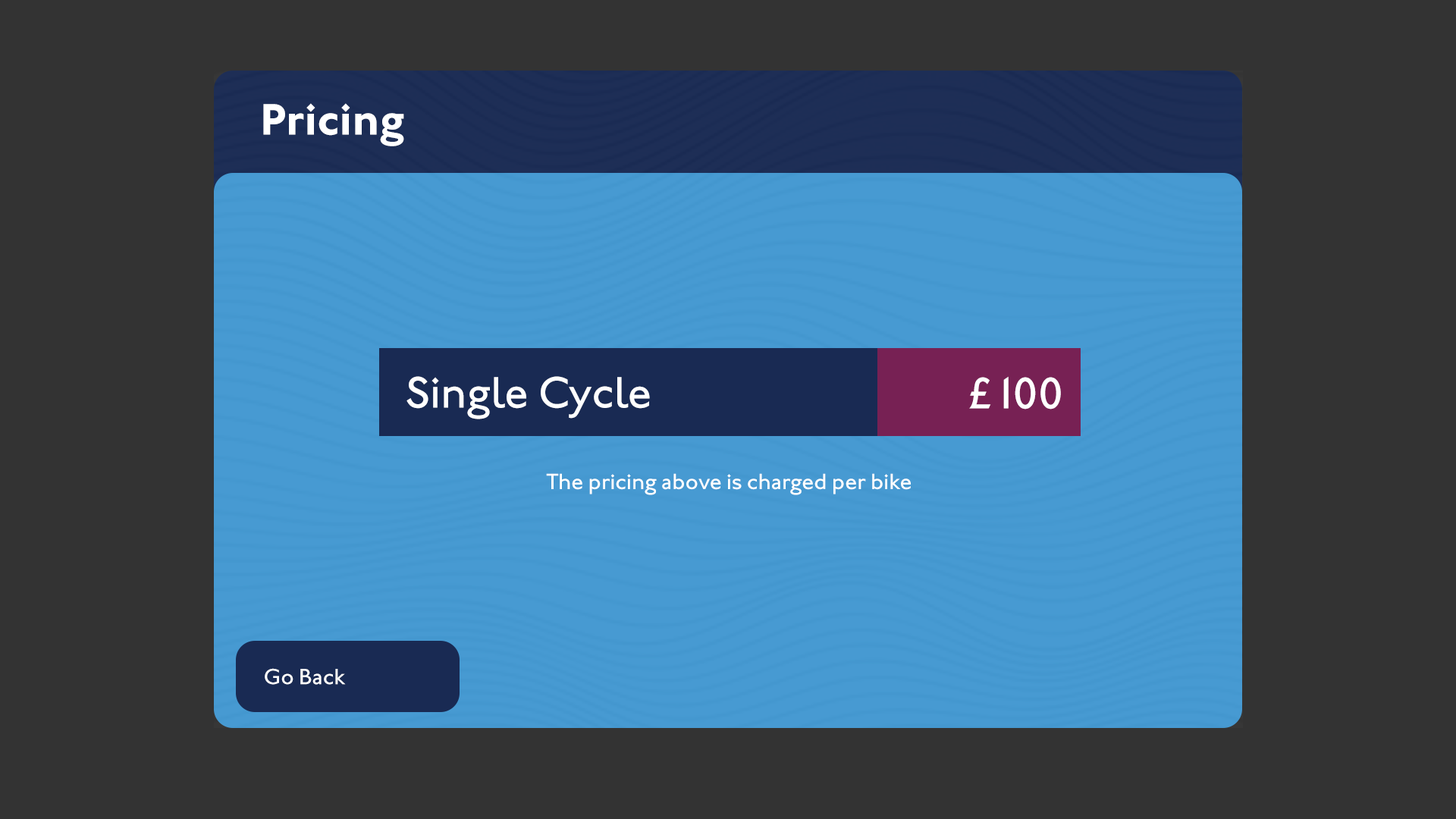
<style>
.page{position:relative;width:1456px;height:819px;background:#333333}
.page>*{position:absolute;margin:0}
.t1{font:45.5px "JohnstonITCStd-Bold";color:#ffffff}
.t2{font:45.5px "JohnstonITCStd-Medium";color:#ffffff}
.t3{font:22.7px "JohnstonITCStd-Medium";color:#ffffff}
</style>
<div class="page">
<p class="t1" style="left:263px;top:103px;width:141px;height:43px">Pricing</p>
<p class="t2" style="left:406px;top:376px;width:244px;height:43px">Single Cycle</p>
<p class="t2" style="left:969px;top:376px;width:92px;height:33px">£100</p>
<p class="t3" style="left:546px;top:473px;width:365px;height:22px">The pricing above is charged per bike</p>
<p class="t3" style="left:265px;top:668px;width:81px;height:17px">Go Back</p>
</div>
